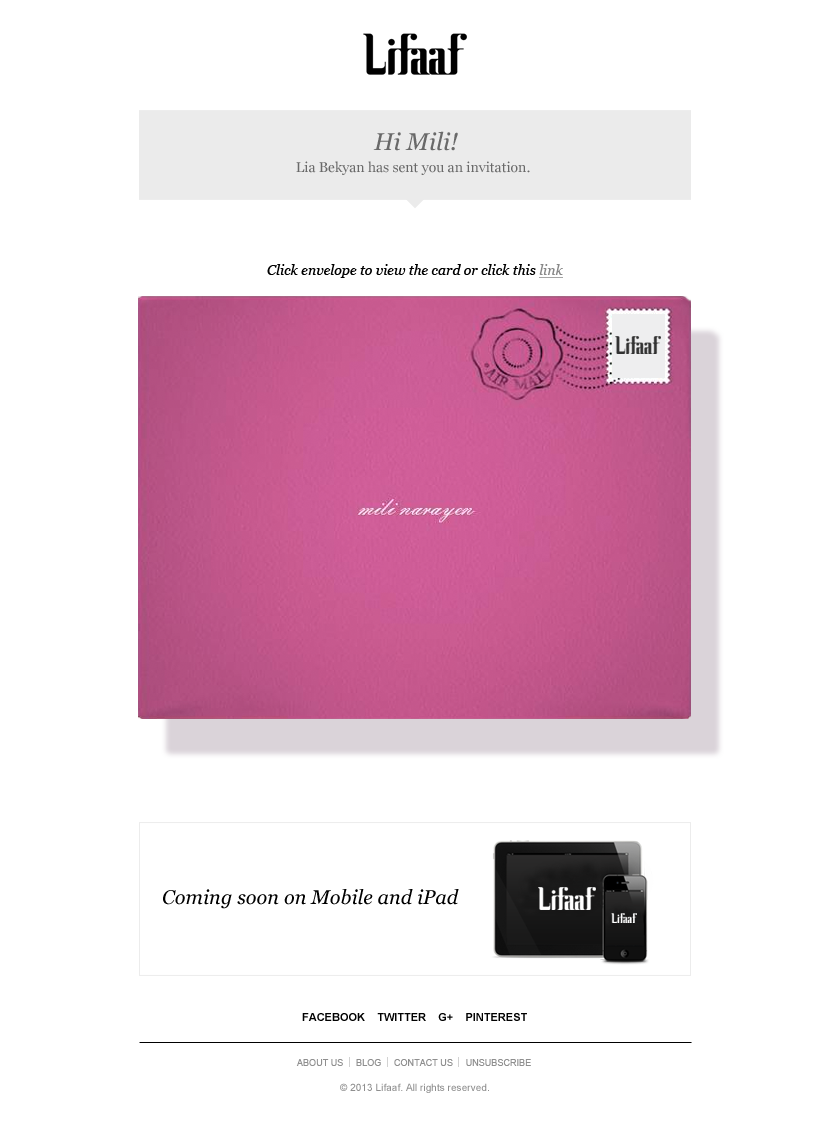
<style>
.page{position:relative;width:828px;height:1133px;background:#ffffff}
.page>*{position:absolute;margin:0}
.t1{font:24px "Georgia-Italic";color:#696969}
.t2{font:14px "Georgia";color:#696969}
.t3{font:14px "Georgia-Italic";color:#000000}
.t4{font:14px "Georgia-Italic";color:#888888;text-decoration:underline}
.t5{font:20px "Georgia-Italic";color:#000000}
.t6{font:11px "Arial-BoldMT";color:#010101;text-transform:uppercase}
.t7{font:9px "ArialMT";letter-spacing:0.005em;color:#8f8f8f;text-transform:uppercase}
.t8{font:10px "ArialMT";letter-spacing:0.005em;color:#8f8f8f}
</style>
<div class="page">
<p class="t1" style="left:373px;top:131px;width:85px;height:20px">Hi Mili!</p>
<p class="t2" style="left:296px;top:161px;width:234px;height:14px">Lia Bekyan has sent you an invitation.</p>
<p class="t3" style="left:267px;top:264px;width:296px;height:14px">Click envelope to view the card or click this <span class="t4">link</span></p>
<p class="t5" style="left:163px;top:889px;width:296px;height:20px">Coming soon on Mobile and iPad</p>
<p class="t6" style="left:302px;top:1013px;width:225px;height:8px">FACEBOOK    TWITTER    G+    PINTEREST</p>
<p class="t7" style="left:296px;top:1059px;width:235px;height:7px">About Us     blog     contact us     unsubscribe</p>
<p class="t8" style="left:340px;top:1083px;width:149px;height:10px">© 2013 Lifaaf. All rights reserved.</p>
</div>
